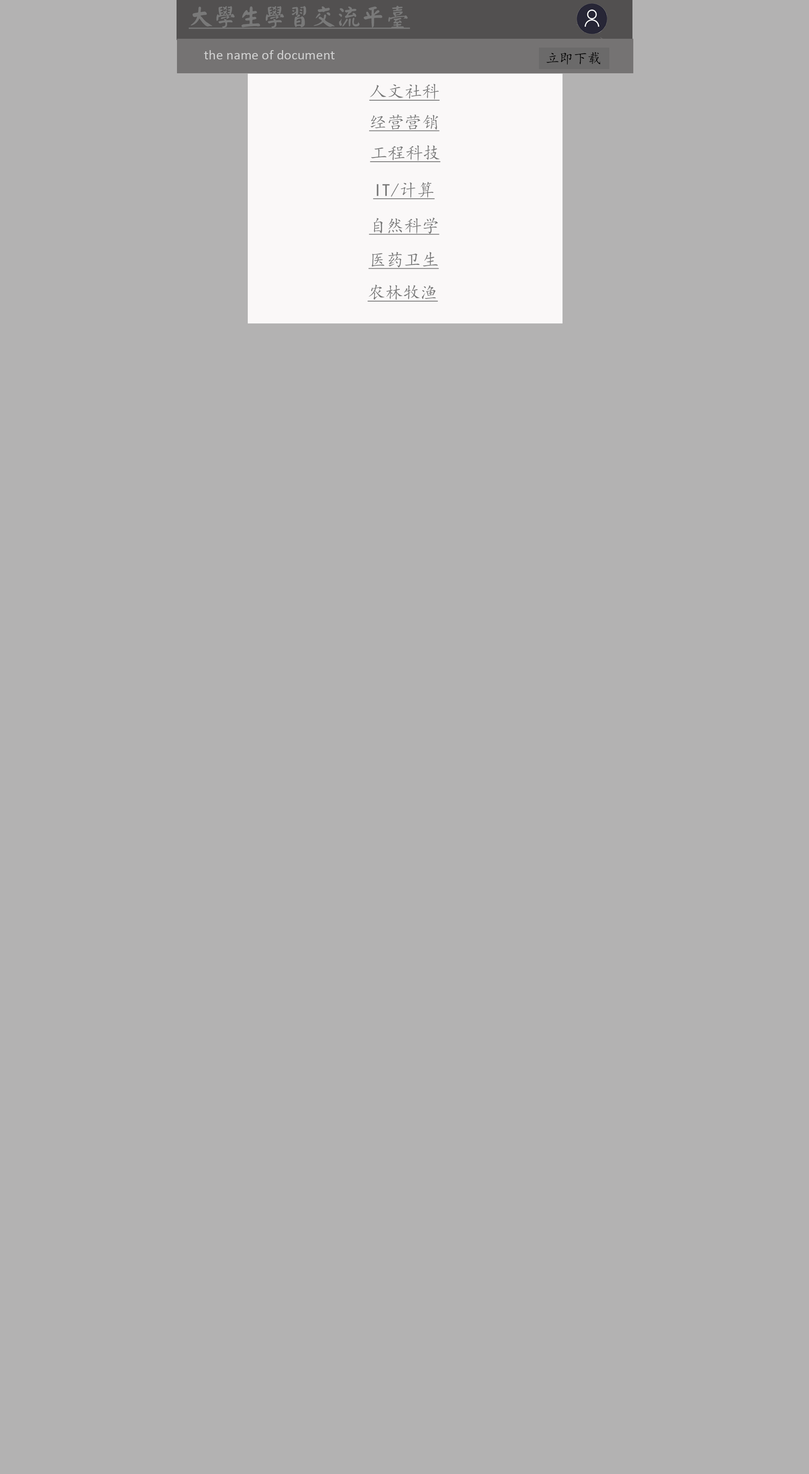
<style>
.page{position:relative;width:809px;height:1474px;background:#b3b2b2}
.page>*{position:absolute;margin:0}
.t1{font:24.6px "HanWangYanKai";color:#797979;text-decoration:underline}
.t2{font:14px "Calibri";color:#d1d1d1}
.t3{font:14px "KaiTi";color:#000000}
.t4{font:17.6px "KaiTi";color:#797979;text-decoration:underline}
</style>
<div class="page">
<p class="t1" style="left:189px;top:5px;width:221px;height:24px">大學生學習交流平臺</p>
<p class="t2" style="left:204px;top:50px;width:130px;height:9px">the name of document</p>
<p class="t3" style="left:546px;top:52px;width:54px;height:13px">立即下载</p>
<p class="t4" style="left:369px;top:84px;width:71px;height:17px">人文社科</p>
<p class="t4" style="left:369px;top:115px;width:70px;height:16px">经营营销</p>
<p class="t4" style="left:370px;top:145px;width:71px;height:17px">工程科技</p>
<p class="t4" style="left:373px;top:182px;width:62px;height:17px">IT/计算</p>
<p class="t4" style="left:369px;top:217px;width:70px;height:18px">自然科学</p>
<p class="t4" style="left:368px;top:252px;width:71px;height:17px">医药卫生</p>
<p class="t4" style="left:367px;top:285px;width:71px;height:17px">农林牧渔</p>
</div>
